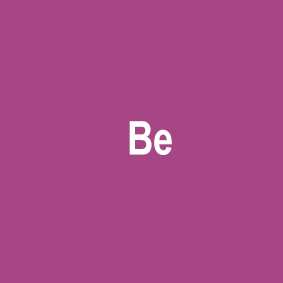
<style>
.page{position:relative;width:283px;height:283px;background:#a64685}
.page>*{position:absolute;margin:0}
.t1{font:46.2px "Arial-BoldMT";color:#ffffff;scale:0.78 1}
</style>
<div class="page">
<p class="t1" style="left:129px;top:121px;width:43px;height:34px">Be</p>
</div>
